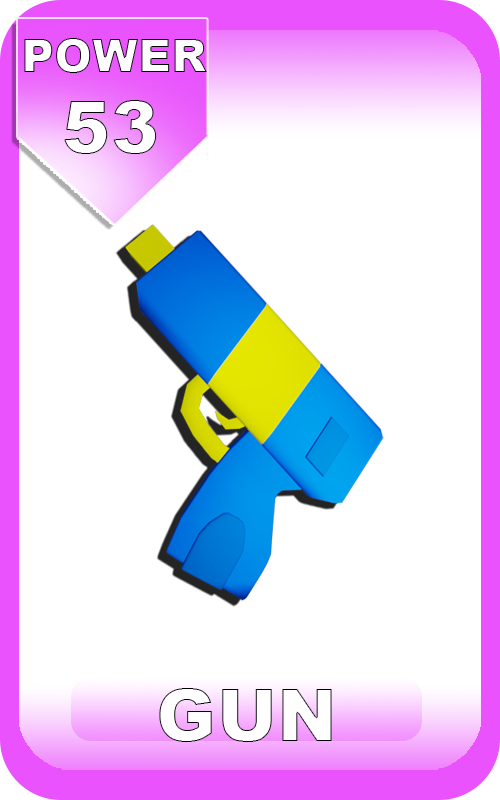
<style>
.page{position:relative;width:500px;height:800px;background:#ffffff}
.page>*{position:absolute;margin:0}
.t1{font:46px "Arial-Black";color:#ffffff}
.t2{font:72px "Arial-Black";letter-spacing:0.01em;color:#ffffff}
</style>
<div class="page">
<p class="t1" style="left:24px;top:38px;width:183px;height:35px">POWER</p>
<p class="t2" style="left:64px;top:100px;width:93px;height:54px">53</p>
</div>
